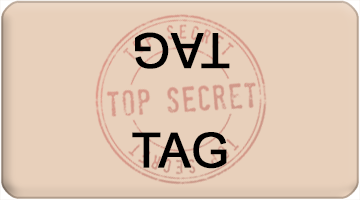
<style>
.page{position:relative;width:360px;height:200px;background:#e8d0bb}
.page>*{position:absolute;margin:0}
.t1{font:48px "ArialMT";color:#000000;font-weight:bold}
</style>
<div class="page">
<p class="t1" style="left:135px;top:32px;width:95px;height:37px;rotate:180deg">TAG</p>
<p class="t1" style="left:132px;top:132px;width:95px;height:37px">TAG</p>
</div>
